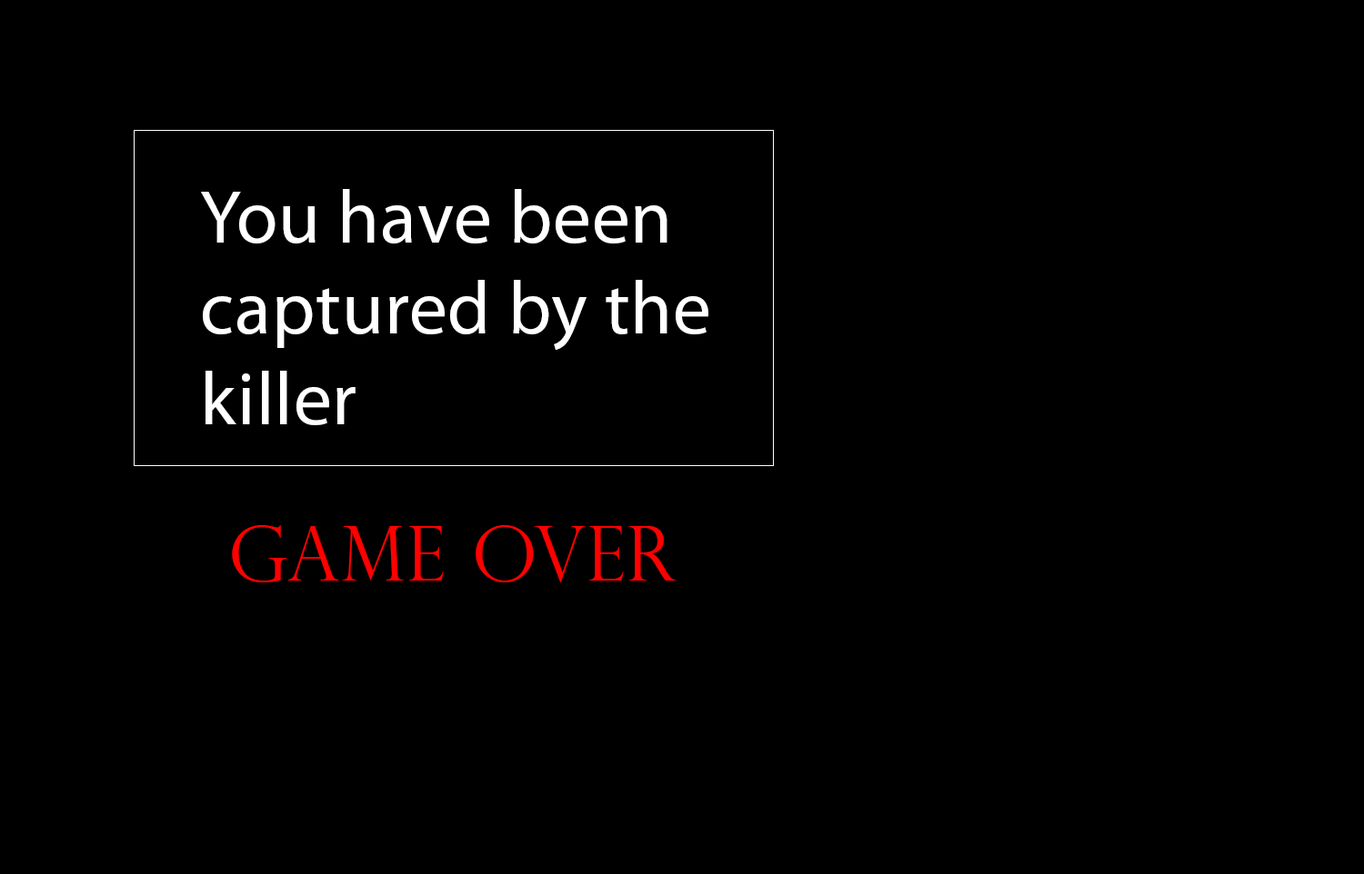
<style>
.page{position:relative;width:1364px;height:874px;background:#000000}
.page>*{position:absolute;margin:0}
.t1{font:75.8px/90.9px "MyriadPro-Regular";letter-spacing:0.01em;color:#ffffff}
.t2{font:75.8px "PerpetuaTitlingMT-Light";letter-spacing:0.01em;color:#ff0000}
</style>
<div class="page">
<p class="t1" style="left:201px;top:189px;width:507px;height:236px">You have been captured by the killer</p>
<p class="t2" style="left:232px;top:525px;width:443px;height:58px">Game Over</p>
</div>
